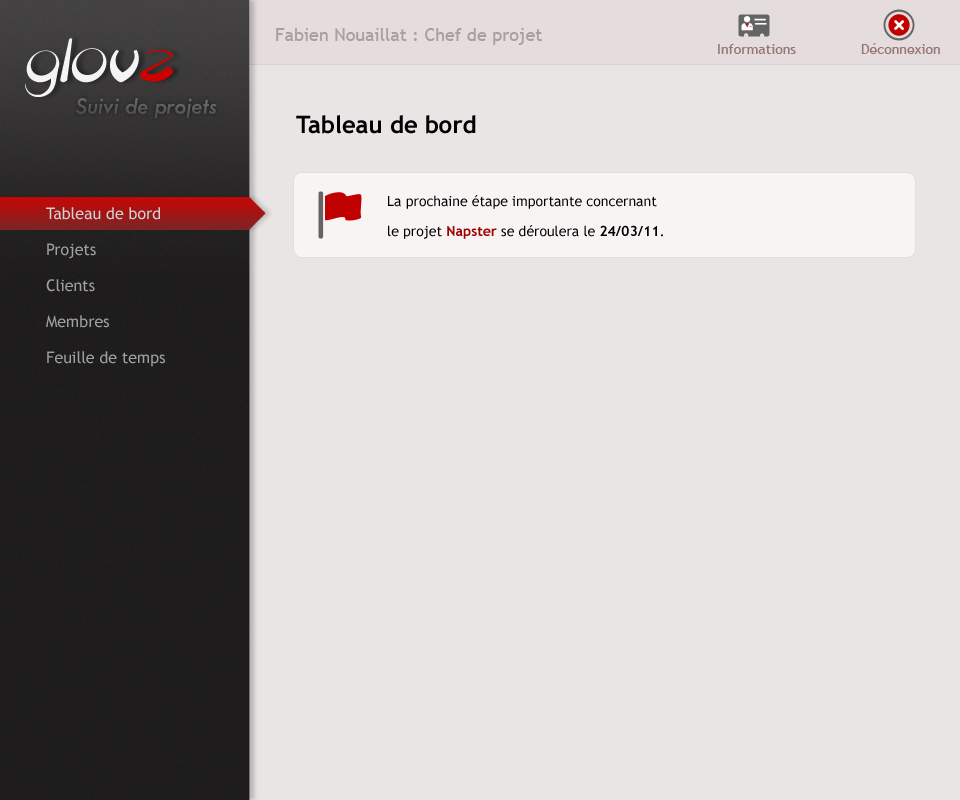
<style>
.page{position:relative;width:960px;height:800px;background:#eae5e5}
.page>*{position:absolute;margin:0}
.t1{font:18px "TrebuchetMS";color:#a89f9f}
.t2{font:72px "Discoid";color:#f4f4f4;font-style:italic}
.t3{font:72px "Discoid";color:#d10000;font-style:italic}
.t4{font:14px "TrebuchetMS";color:#997676}
.t5{font:24px "TwCenMT-Italic";color:#606060}
.t6{font:24px "TrebuchetMS-Bold";color:#010101}
.t7{font:14px/30px "TrebuchetMS";color:#010101}
.t8{font:14px/30px "TrebuchetMS-Bold";color:#a00101}
.t9{font:14px/30px "TrebuchetMS-Bold";color:#010101}
.t10{font:16px/36px "TrebuchetMS";color:#a0a0a0}
.t11{font:16px/36px "TrebuchetMS";color:#d3d3d3}
</style>
<div class="page">
<p class="t1" style="left:276px;top:28px;width:266px;height:17px">Fabien Nouaillat : Chef de projet</p>
<p class="t2" style="left:25px;top:38px;width:149px;height:59px">glov<span class="t3">z</span></p>
<p class="t4" style="left:718px;top:43px;width:222px;height:11px">Informations  Déconnexion</p>
<p class="t5" style="left:75px;top:98px;width:142px;height:21px">Suivi de projets</p>
<p class="t6" style="left:296px;top:115px;width:180px;height:19px">Tableau de bord</p>
<p class="t7" style="left:388px;top:195px;width:275px;height:44px">La prochaine étape importante concernant<br>le projet <span class="t8">Napster</span> se déroulera le <span class="t9">24/03/11</span>.</p>
<p class="t10" style="left:46px;top:207px;width:119px;height:160px"><span class="t11">Tableau de bord<br></span>Projets<br>Clients<br>Membres<br>Feuille de temps</p>
</div>
